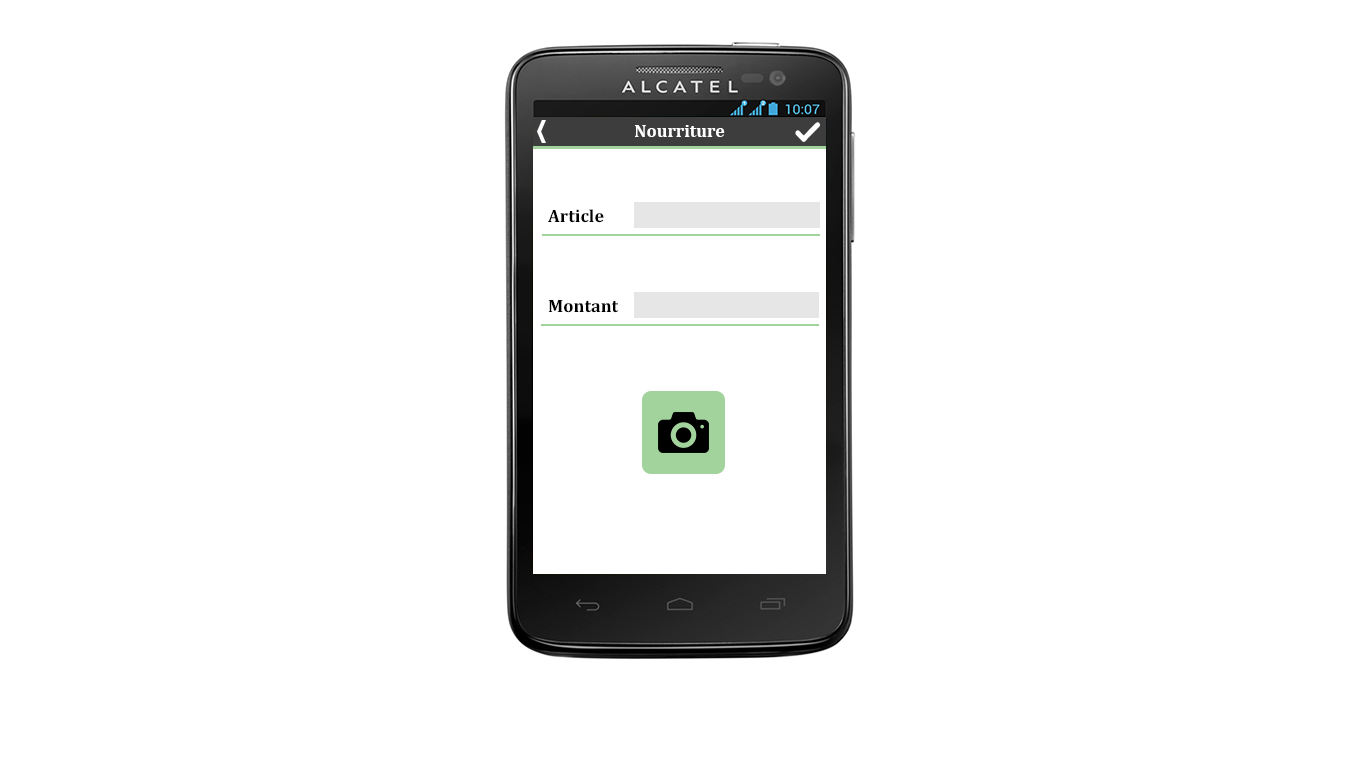
<style>
.page{position:relative;width:1366px;height:768px;background:#ffffff}
.page>*{position:absolute;margin:0}
.t1{font:18px "Cambria-Bold";color:#ffffff}
.t2{font:18.1px "Cambria-Bold";color:#000000}
</style>
<div class="page">
<p class="t1" style="left:635px;top:125px;width:90px;height:12px">Nourriture</p>
<p class="t2" style="left:548px;top:209px;width:56px;height:14px">Article</p>
<p class="t2" style="left:548px;top:300px;width:71px;height:13px">Montant</p>
</div>
